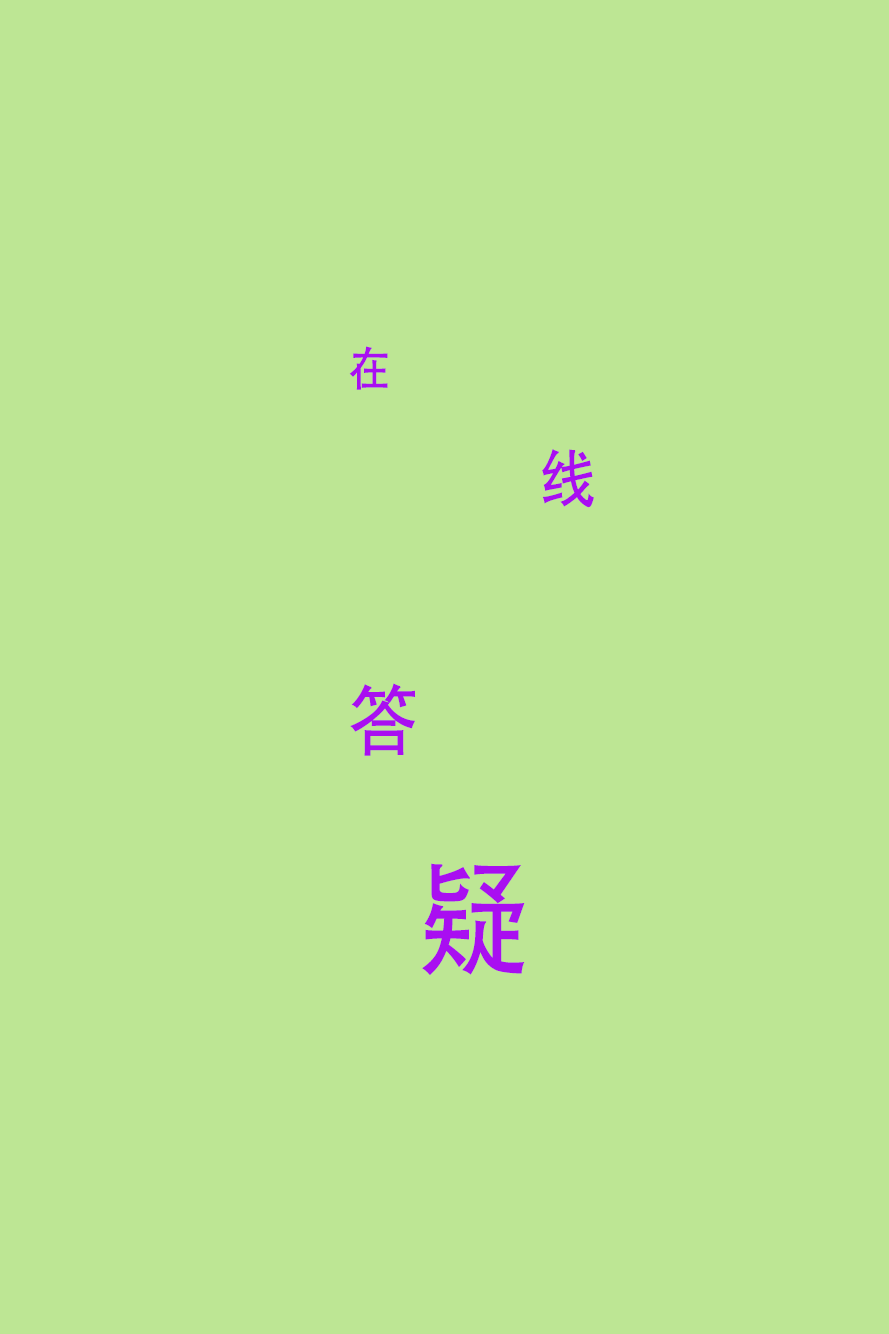
<style>
.page{position:relative;width:889px;height:1334px;background:#bde694}
.page>*{position:absolute;margin:0}
.t1{font:47.5px "AdobeHeitiStd-Regular";letter-spacing:0.12em;color:#a90ef1;scale:0.89 1}
.t2{font:63.4px "AdobeHeitiStd-Regular";letter-spacing:0.12em;color:#a90ef1;scale:0.89 1}
.t3{font:79.2px "AdobeHeitiStd-Regular";letter-spacing:0.12em;color:#a90ef1;scale:0.89 1}
.t4{font:126.7px "AdobeHeitiStd-Regular";letter-spacing:0.12em;color:#a90ef1;scale:0.89 1}
</style>
<div class="page">
<p class="t1" style="left:349px;top:346px;width:39px;height:44px">在</p>
<p class="t2" style="left:542px;top:449px;width:52px;height:59px">线</p>
<p class="t3" style="left:350px;top:683px;width:65px;height:73px">答</p>
<p class="t4" style="left:422px;top:863px;width:103px;height:112px">疑</p>
</div>
